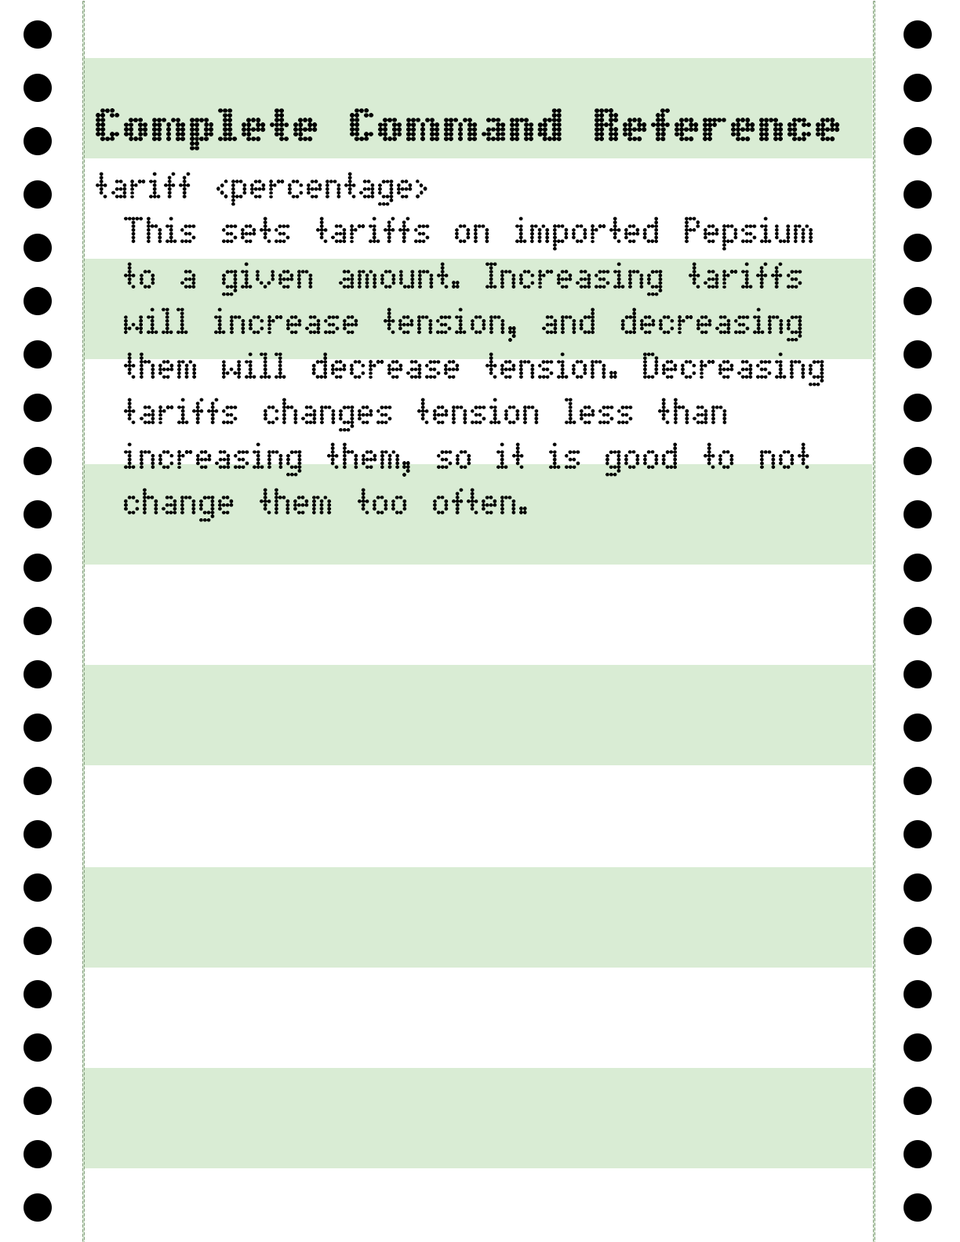
<style>
.page{position:relative;width:960px;height:1242px;background:#ffffff}
.page>*{position:absolute;margin:0}
.t1{font:47.1px "DotMatrixBold";color:#000000}
.t2{font:37.6px "DotMatrix";color:#000000}
</style>
<div class="page">
<p class="t1" style="left:96px;top:108px;width:744px;height:43px">Complete Command Reference</p>
<p class="t2" style="left:96px;top:172px;width:728px;height:350px">tariff &lt;percentage&gt;<br> This sets tariffs on imported Pepsium<br> to a given amount. Increasing tariffs<br> will increase tension, and decreasing<br> them will decrease tension. Decreasing<br> tariffs changes tension less than<br> increasing them, so it is good to not<br> change them too often.</p>
</div>
